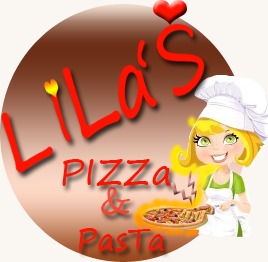
<style>
.page{position:relative;width:268px;height:262px;background:#faf7f3}
.page>*{position:absolute;margin:0}
.t1{font:36px "SegoePrint";color:#ff1200}
.t2{font:36px "SegoePrint";color:#fa4632}
.t3{font:30px "SegoePrint";color:#ff1200}
</style>
<div class="page">
<p class="t1" style="left:62px;top:159px;width:109px;height:27px">PIZZa</p>
<p class="t2" style="left:101px;top:187px;width:30px;height:28px">&amp;</p>
<p class="t3" style="left:79px;top:228px;width:85px;height:23px">PasTa</p>
</div>
